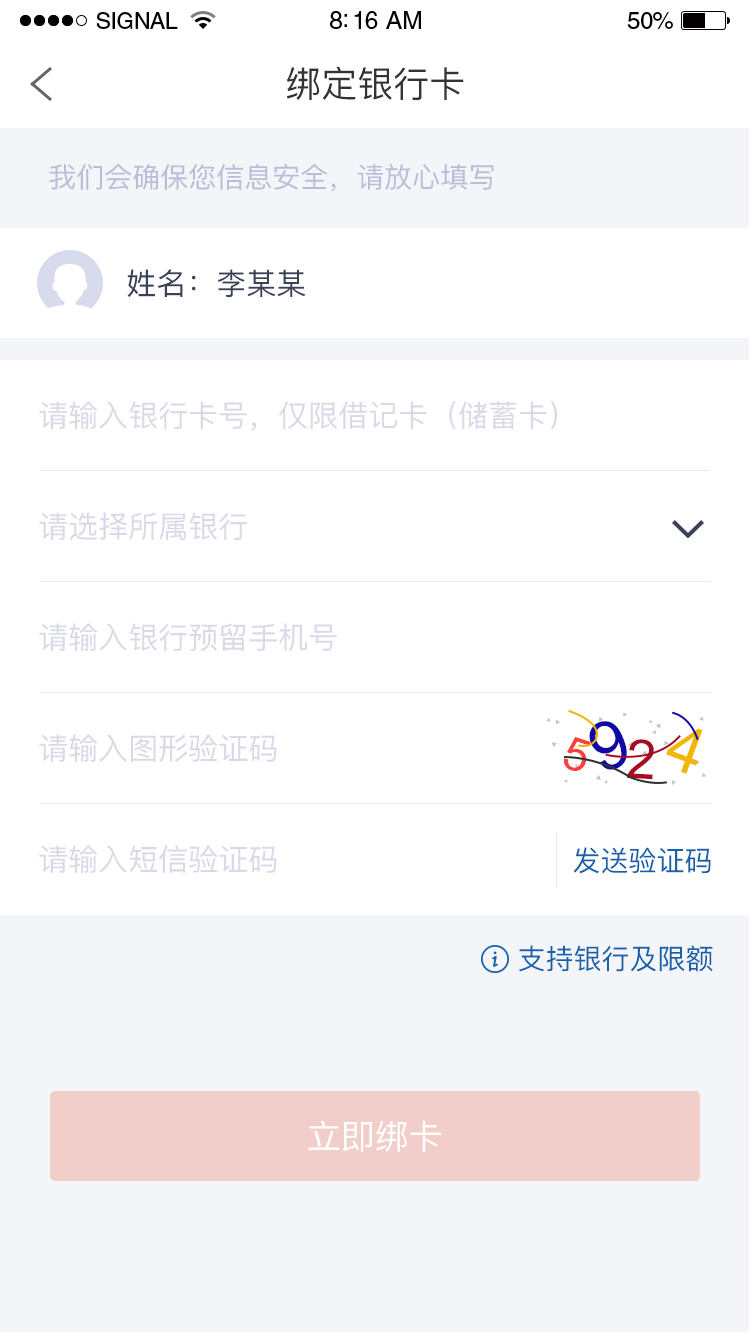
<style>
.page{position:relative;width:750px;height:1334px;background:#ffffff}
.page>*{position:absolute;margin:0}
.t1{font:23px "HelveticaLTStd-Roman";letter-spacing:-0.02em;color:#000000}
.t2{font:25px "HelveticaLTStd-Roman";letter-spacing:-0.02em;color:#000000}
.t3{font:24px "HelveticaLTStd-Roman";letter-spacing:-0.02em;color:#000000}
.t4{font:36px "PingFangSC-Regular";color:#333333}
.t5{font:28px "PingFangSC-Regular";color:#b8bed7}
.t6{font:30px "PingFangSC-Regular";color:#394259}
.t7{font:30px "PingFangSC-Regular";color:#d8dbe7}
.t8{font:67.6px "ArialMT";color:#1109a7}
.t9{font:46px "ArialMT";color:#ff3e3e}
.t10{font:64.7px "ArialMT";color:#f2b600}
.t11{font:54.5px "ArialMT";color:#a80923}
.t12{font:28px "PingFangSC-Regular";color:#1661ab}
.t13{font:34px "PingFangSC-Regular";color:#ffffff}
</style>
<div class="page">
<p class="t1" style="left:96px;top:12px;width:82px;height:17px">SIGNAL</p>
<p class="t2" style="left:330px;top:11px;width:91px;height:18px">8:16 AM</p>
<p class="t3" style="left:627px;top:12px;width:46px;height:17px">50%</p>
<p class="t4" style="left:286px;top:66px;width:178px;height:34px">绑定银行卡</p>
<p class="t5" style="left:49px;top:163px;width:445px;height:29px">我们会确保您信息安全，请放心填写</p>
<p class="t6" style="left:127px;top:269px;width:179px;height:28px">姓名：李某某</p>
<p class="t7" style="left:39px;top:401px;width:519px;height:30px">请输入银行卡号，仅限借记卡（储蓄卡）</p>
<p class="t7" style="left:39px;top:512px;width:208px;height:28px">请选择所属银行</p>
<p class="t7" style="left:39px;top:623px;width:298px;height:28px">请输入银行预留手机号</p>
<p class="t8" style="left:589px;top:721px;width:38px;height:49px;rotate:-23deg">9</p>
<p class="t7" style="left:39px;top:734px;width:238px;height:28px">请输入图形验证码</p>
<p class="t9" style="left:564px;top:737px;width:27px;height:34px;rotate:18deg">5</p>
<p class="t10" style="left:666px;top:728px;width:37px;height:46px;rotate:21deg">4</p>
<p class="t11" style="left:627px;top:739px;width:27px;height:41px;rotate:3deg">2</p>
<p class="t7" style="left:39px;top:845px;width:238px;height:28px">请输入短信验证码</p>
<p class="t12" style="left:573px;top:847px;width:138px;height:27px">发送验证码</p>
<p class="t12" style="left:519px;top:945px;width:194px;height:27px">支持银行及限额</p>
<p class="t13" style="left:308px;top:1120px;width:133px;height:32px">立即绑卡</p>
</div>
